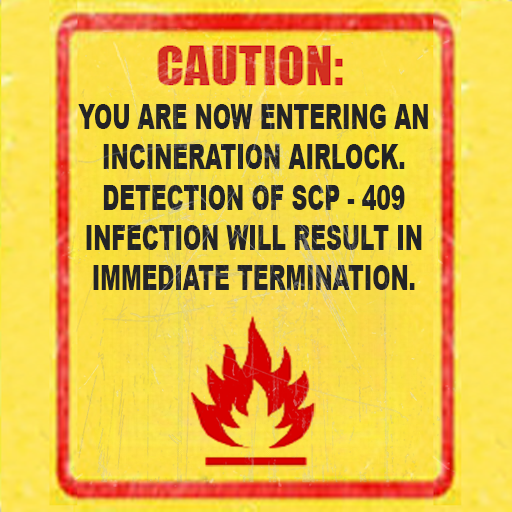
<style>
.page{position:relative;width:512px;height:512px}
.page>*{position:absolute;margin:0}
.t1{font:33.5px "Arial-Black";color:#232325;text-transform:uppercase;scale:0.65 1}
</style>
<div class="page">
<p class="t1" style="left:78px;top:104px;width:350px;height:186px;text-align:center">You are now entering an incineration airlock. Detection of SCP - 409 infection will result in immediate termination.</p>
</div>
